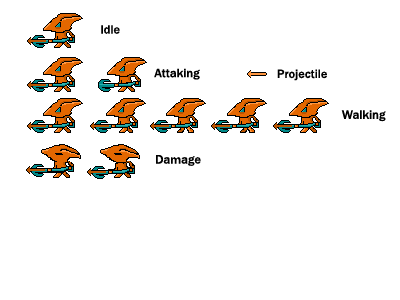
<style>
.page{position:relative;width:400px;height:300px;background:#ffffff}
.page>*{position:absolute;margin:0}
.t1{font:12.5px "FranklinGothic-Medium";color:#000000}
</style>
<div class="page">
<p class="t1" style="left:101px;top:25px;width:19px;height:9px">Idle</p>
<p class="t1" style="left:154px;top:68px;width:46px;height:12px">Attaking</p>
<p class="t1" style="left:277px;top:69px;width:50px;height:12px">Projectile</p>
<p class="t1" style="left:341px;top:110px;width:45px;height:12px">Walking</p>
<p class="t1" style="left:156px;top:155px;width:45px;height:11px">Damage</p>
</div>
